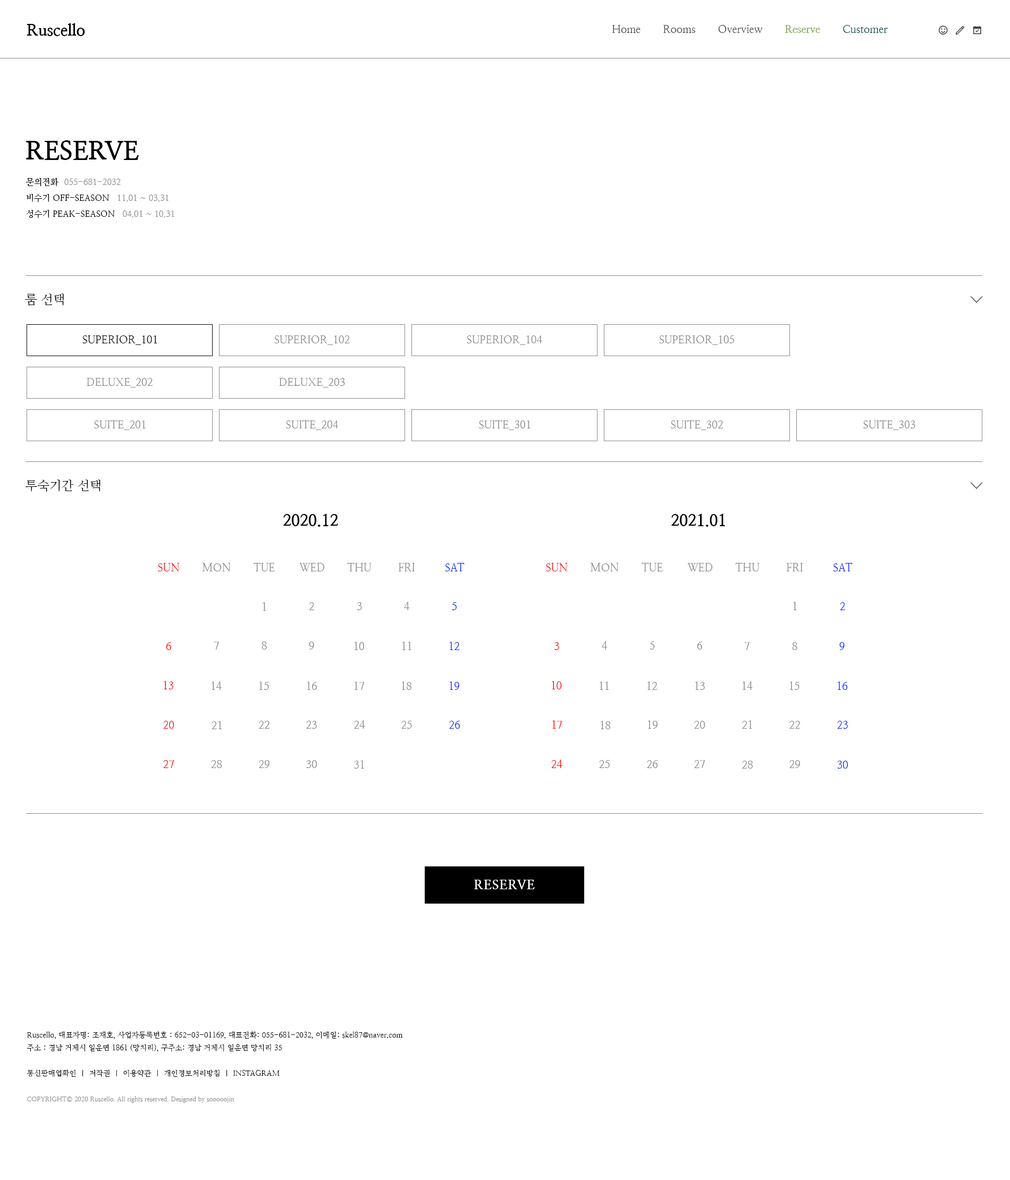
<style>
.page{position:relative;width:1010px;height:1180px;background:#ffffff}
.page>*{position:absolute;margin:0}
.t1{font:16px "NanumMyeongjoExtraBold";color:#000000}
.t2{font:10.6px "NanumMyeongjo";color:#444444}
.t3{font:10.6px "NanumMyeongjoExtraBold";color:#8fb26c}
.t4{font:10.6px "NanumMyeongjo";color:#004444}
.t5{font:25.5px "NanumMyeongjoExtraBold";color:#000000;text-transform:uppercase}
.t6{font:8.5px/16px "NanumMyeongjoBold";color:#000000}
.t7{font:8.5px/16px "NanumMyeongjo";color:#888888}
.t8{font:12.8px "NanumMyeongjo";color:#000000}
.t9{font:10.6px "NanumMyeongjo";color:#000000}
.t10{font:10.6px "NanumMyeongjo";color:#888888}
.t11{font:10.9px "NanumMyeongjo";color:#fe0000}
.t12{font:10.9px "NanumMyeongjo";color:#888888}
.t13{font:10.9px "NanumMyeongjo";color:#0024ff}
.t14{font:12.8px "NanumMyeongjoExtraBold";letter-spacing:0.05em;color:#ffffff}
.t15{font:7.4px/12.8px "NanumMyeongjo";color:#000000}
.t16{font:6.4px/12.8px "NanumMyeongjo";color:#888888}
</style>
<div class="page">
<p class="t1" style="left:27px;top:23px;width:58px;height:13px">Ruscello</p>
<p class="t2" style="left:612px;top:25px;width:276px;height:8px">Home       Rooms       Overview       <span class="t3">Reserve       </span><span class="t4">Customer</span></p>
<p class="t5" style="left:26px;top:140px;width:113px;height:20px">reserve</p>
<p class="t6" style="left:26px;top:178px;width:148px;height:41px">문의전화 <span class="t7"> 055-681-2032<br></span>비수기 OFF-SEASON  <span class="t7"> 11.01 ~ 03.31<br></span>성수기 PEAK-SEASON <span class="t7">  04.01 ~ 10.31</span></p>
<p class="t8" style="left:25px;top:293px;width:39px;height:13px">룸 선택</p>
<p class="t9" style="left:82px;top:336px;width:75px;height:9px">SUPERIOR_101</p>
<p class="t10" style="left:274px;top:336px;width:76px;height:9px">SUPERIOR_102</p>
<p class="t10" style="left:467px;top:336px;width:75px;height:9px">SUPERIOR_104</p>
<p class="t10" style="left:659px;top:336px;width:75px;height:9px">SUPERIOR_105</p>
<p class="t10" style="left:87px;top:378px;width:66px;height:10px">DELUXE_202</p>
<p class="t10" style="left:279px;top:378px;width:66px;height:10px">DELUXE_203</p>
<p class="t10" style="left:94px;top:421px;width:52px;height:9px">SUITE_201</p>
<p class="t10" style="left:286px;top:421px;width:53px;height:9px">SUITE_204</p>
<p class="t10" style="left:479px;top:421px;width:52px;height:9px">SUITE_301</p>
<p class="t10" style="left:671px;top:421px;width:52px;height:9px">SUITE_302</p>
<p class="t10" style="left:863px;top:421px;width:53px;height:9px">SUITE_303</p>
<p class="t8" style="left:26px;top:480px;width:74px;height:12px">투숙기간 선택</p>
<p class="t1" style="left:283px;top:514px;width:56px;height:13px">2020.12</p>
<p class="t1" style="left:672px;top:514px;width:53px;height:13px">2021.01</p>
<p class="t11" style="left:158px;top:563px;width:22px;height:9px">SUN</p>
<p class="t12" style="left:202px;top:563px;width:29px;height:9px">MON</p>
<p class="t12" style="left:254px;top:563px;width:21px;height:9px">TUE</p>
<p class="t12" style="left:299px;top:563px;width:25px;height:9px">WED</p>
<p class="t12" style="left:347px;top:563px;width:25px;height:9px">THU</p>
<p class="t12" style="left:398px;top:563px;width:17px;height:9px">FRI</p>
<p class="t13" style="left:445px;top:563px;width:19px;height:9px">SAT</p>
<p class="t11" style="left:546px;top:563px;width:22px;height:9px">SUN</p>
<p class="t12" style="left:590px;top:563px;width:29px;height:9px">MON</p>
<p class="t12" style="left:642px;top:563px;width:21px;height:9px">TUE</p>
<p class="t12" style="left:687px;top:563px;width:25px;height:9px">WED</p>
<p class="t12" style="left:735px;top:563px;width:25px;height:9px">THU</p>
<p class="t12" style="left:786px;top:563px;width:17px;height:9px">FRI</p>
<p class="t13" style="left:833px;top:563px;width:19px;height:9px">SAT</p>
<p class="t12" style="left:263px;top:602px;width:3px;height:9px">1</p>
<p class="t12" style="left:309px;top:602px;width:5px;height:8px">2</p>
<p class="t12" style="left:357px;top:602px;width:5px;height:8px">3</p>
<p class="t12" style="left:404px;top:602px;width:6px;height:8px">4</p>
<p class="t13" style="left:452px;top:602px;width:5px;height:8px">5</p>
<p class="t12" style="left:793px;top:602px;width:4px;height:8px">1</p>
<p class="t13" style="left:840px;top:602px;width:5px;height:8px">2</p>
<p class="t12" style="left:214px;top:642px;width:5px;height:8px">7</p>
<p class="t12" style="left:262px;top:642px;width:5px;height:8px">8</p>
<p class="t12" style="left:309px;top:642px;width:5px;height:8px">9</p>
<p class="t12" style="left:354px;top:642px;width:10px;height:8px">10</p>
<p class="t12" style="left:402px;top:642px;width:10px;height:8px">11</p>
<p class="t13" style="left:449px;top:642px;width:11px;height:8px">12</p>
<p class="t12" style="left:602px;top:641px;width:6px;height:9px">4</p>
<p class="t12" style="left:650px;top:642px;width:5px;height:8px">5</p>
<p class="t12" style="left:697px;top:642px;width:5px;height:8px">6</p>
<p class="t11" style="left:166px;top:642px;width:5px;height:8px">6</p>
<p class="t11" style="left:555px;top:642px;width:4px;height:8px">3</p>
<p class="t12" style="left:744px;top:642px;width:6px;height:8px">7</p>
<p class="t12" style="left:792px;top:642px;width:6px;height:8px">8</p>
<p class="t13" style="left:840px;top:642px;width:5px;height:8px">9</p>
<p class="t11" style="left:164px;top:681px;width:9px;height:9px">13</p>
<p class="t12" style="left:212px;top:682px;width:10px;height:8px">14</p>
<p class="t12" style="left:259px;top:682px;width:10px;height:8px">15</p>
<p class="t12" style="left:307px;top:682px;width:10px;height:8px">16</p>
<p class="t12" style="left:354px;top:682px;width:10px;height:8px">17</p>
<p class="t12" style="left:401px;top:682px;width:11px;height:8px">18</p>
<p class="t13" style="left:449px;top:682px;width:10px;height:8px">19</p>
<p class="t11" style="left:552px;top:681px;width:10px;height:9px">10</p>
<p class="t12" style="left:600px;top:682px;width:9px;height:8px">11</p>
<p class="t12" style="left:647px;top:682px;width:11px;height:8px">12</p>
<p class="t12" style="left:695px;top:682px;width:10px;height:8px">13</p>
<p class="t12" style="left:742px;top:682px;width:11px;height:8px">14</p>
<p class="t12" style="left:790px;top:682px;width:10px;height:8px">15</p>
<p class="t13" style="left:837px;top:682px;width:11px;height:8px">16</p>
<p class="t11" style="left:163px;top:721px;width:11px;height:8px">20</p>
<p class="t12" style="left:212px;top:721px;width:10px;height:8px">21</p>
<p class="t12" style="left:259px;top:721px;width:11px;height:8px">22</p>
<p class="t12" style="left:306px;top:721px;width:11px;height:8px">23</p>
<p class="t12" style="left:354px;top:720px;width:11px;height:9px">24</p>
<p class="t12" style="left:401px;top:721px;width:11px;height:8px">25</p>
<p class="t13" style="left:449px;top:721px;width:11px;height:8px">26</p>
<p class="t11" style="left:552px;top:720px;width:11px;height:9px">17</p>
<p class="t12" style="left:601px;top:721px;width:10px;height:8px">18</p>
<p class="t12" style="left:648px;top:720px;width:10px;height:9px">19</p>
<p class="t12" style="left:694px;top:721px;width:11px;height:8px">20</p>
<p class="t12" style="left:742px;top:720px;width:10px;height:9px">21</p>
<p class="t12" style="left:790px;top:721px;width:11px;height:8px">22</p>
<p class="t13" style="left:837px;top:721px;width:11px;height:8px">23</p>
<p class="t11" style="left:163px;top:760px;width:11px;height:8px">27</p>
<p class="t12" style="left:211px;top:760px;width:11px;height:8px">28</p>
<p class="t12" style="left:259px;top:760px;width:11px;height:8px">29</p>
<p class="t12" style="left:306px;top:760px;width:11px;height:8px">30</p>
<p class="t12" style="left:354px;top:760px;width:10px;height:9px">31</p>
<p class="t11" style="left:551px;top:760px;width:12px;height:8px">24</p>
<p class="t12" style="left:599px;top:760px;width:11px;height:8px">25</p>
<p class="t12" style="left:647px;top:760px;width:11px;height:8px">26</p>
<p class="t12" style="left:694px;top:760px;width:11px;height:8px">27</p>
<p class="t12" style="left:742px;top:761px;width:11px;height:8px">28</p>
<p class="t12" style="left:790px;top:760px;width:10px;height:8px">29</p>
<p class="t13" style="left:837px;top:761px;width:11px;height:8px">30</p>
<p class="t14" style="left:474px;top:880px;width:61px;height:10px">RESERVE</p>
<p class="t15" style="left:27px;top:1031px;width:376px;height:72px">Ruscello, 대표자명: 조재호, 사업자등록번호 : 652-03-01169, 대표전화: 055-681-2032, 이메일: skel87@naver.com<br>주소 : 경남 거제시 일운면 1861 (망치리), 구주소: 경남 거제시 일운면 망치리 35<br><br>통신판매업확인  |  저작권  |  이용약관  |  개인정보처리방침  |  INSTAGRAM<br><br><span class="t16">COPYRIGHT© 2020 Ruscello. All rights reserved. Designed by sooooojin</span></p>
</div>
